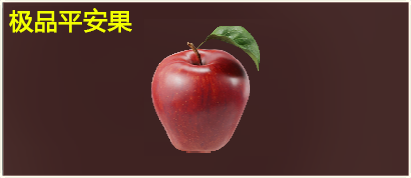
<style>
.page{position:relative;width:411px;height:178px}
.page>*{position:absolute;margin:0}
.t1{font:24px "MicrosoftYaHeiUI";color:#f4ff00;font-weight:bold}
</style>
<div class="page">
<p class="t1" style="left:9px;top:8px;width:123px;height:25px">极品平安果</p>
</div>
